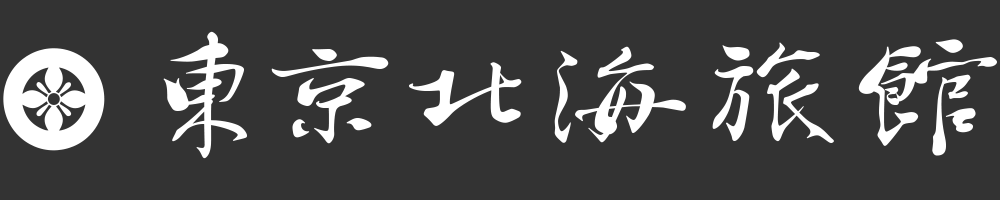
<style>
.page{position:relative;width:1000px;height:200px;background:#333333}
.page>*{position:absolute;margin:0}
.t1{font:104.7px "KazurakiSP2N-Light";letter-spacing:0.2em;color:#ffffff}
</style>
<div class="page">
<p class="t1" style="left:163px;top:31px;width:834px;height:128px">東京北海旅館</p>
</div>
